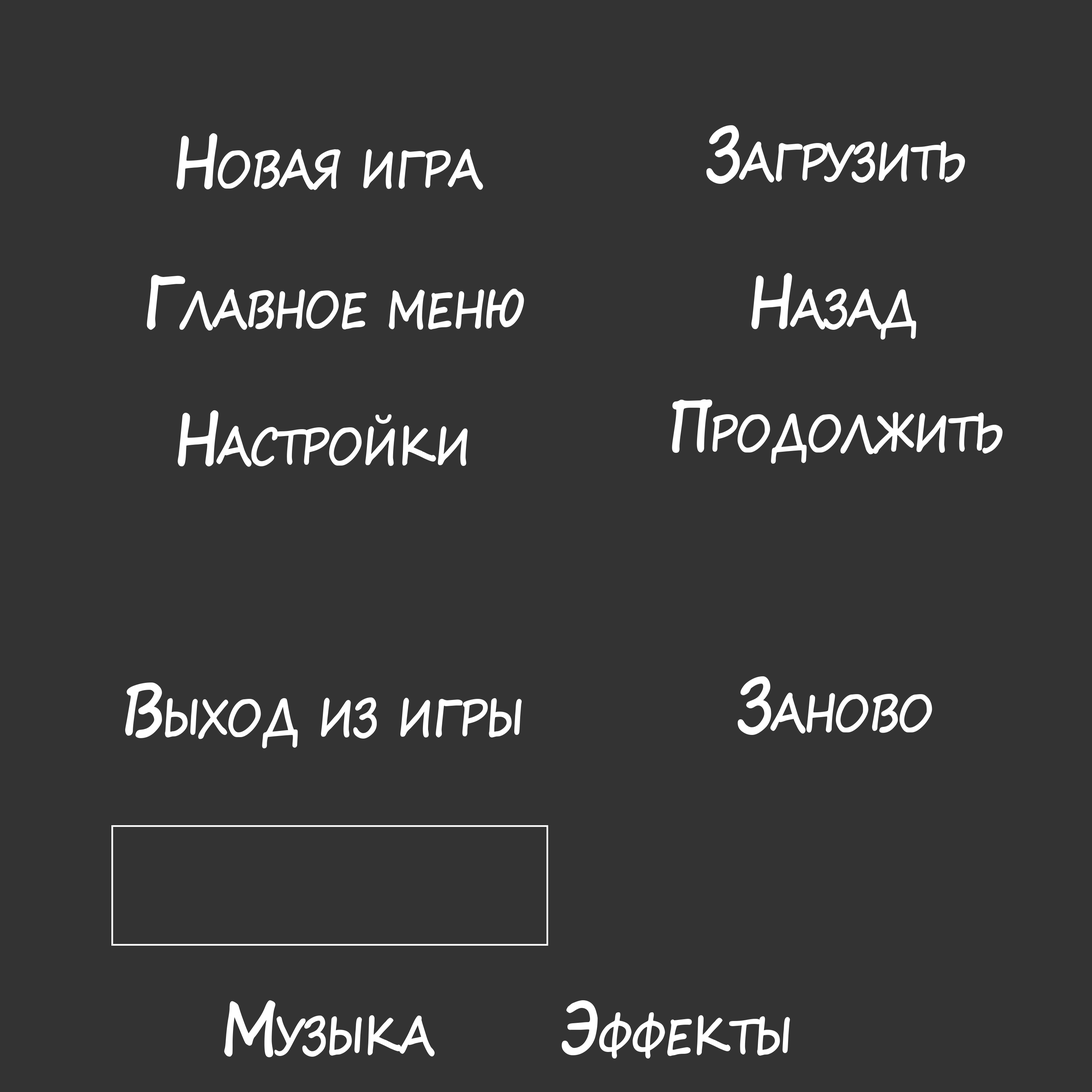
<style>
.page{position:relative;width:1092px;height:1092px;background:#333333}
.page>*{position:absolute;margin:0}
.t1{font:71.1px "SegoePrint-Bold";letter-spacing:-0.06em;color:#ffffff;font-variant:small-caps;scale:0.82 1}
</style>
<div class="page">
<p class="t1" style="left:706px;top:125px;width:259px;height:59px">Загрузить</p>
<p class="t1" style="left:177px;top:133px;width:306px;height:57px">Новая игра</p>
<p class="t1" style="left:147px;top:275px;width:377px;height:56px">Главное меню</p>
<p class="t1" style="left:751px;top:273px;width:165px;height:67px">Назад</p>
<p class="t1" style="left:672px;top:399px;width:331px;height:65px">Продолжить</p>
<p class="t1" style="left:178px;top:410px;width:290px;height:57px">Настройки</p>
<p class="t1" style="left:737px;top:676px;width:195px;height:59px">Заново</p>
<p class="t1" style="left:125px;top:682px;width:397px;height:66px">Выход из игры</p>
<p class="t1" style="left:224px;top:1000px;width:211px;height:57px">Музыка</p>
<p class="t1" style="left:562px;top:1000px;width:228px;height:58px">Эффекты</p>
</div>
